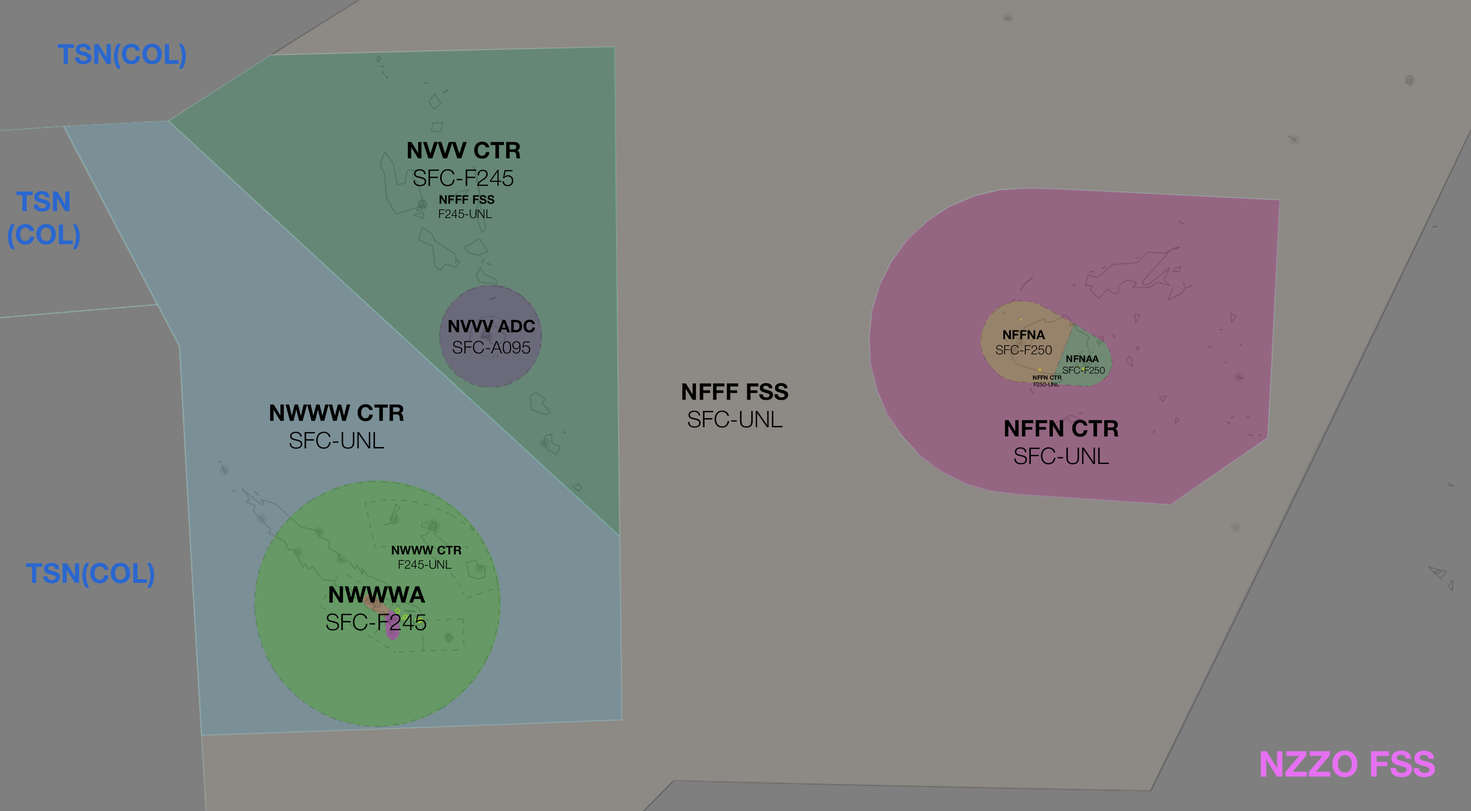
<style>
.page{position:relative;width:1471px;height:811px;background:#8d8984}
.page>*{position:absolute;margin:0}
.t1{font:27.6px "HelveticaNeue-Bold";color:#2967cf}
.t2{font:23px "HelveticaNeue-Bold";color:#000000}
.t3{font:23px "HelveticaNeue-Light";color:#000000}
.t4{font:12px "HelveticaNeue-Bold";color:#000000}
.t5{font:12px "HelveticaNeue-Light";color:#000000}
.t6{font:17.3px "HelveticaNeue-Bold";color:#000000}
.t7{font:17.3px "HelveticaNeue-Light";color:#000000}
.t8{font:12.7px "HelveticaNeue-Light";color:#000000}
.t9{font:12.7px "HelveticaNeue-Bold";color:#000000}
.t10{font:9.6px "HelveticaNeue-Light";color:#000000}
.t11{font:9.6px "HelveticaNeue-Bold";color:#000000}
.t12{font:5.8px "HelveticaNeue-Bold";color:#000000}
.t13{font:5.8px "HelveticaNeue-Light";color:#000000}
.t14{font:35.6px "HelveticaNeue-Bold";color:#e570f1}
</style>
<div class="page">
<p class="t1" style="left:57px;top:44px;width:129px;height:25px">TSN(COL)</p>
<p class="t2" style="left:407px;top:141px;width:113px;height:45px;text-align:center">NVVV CTR<br><span class="t3">SFC-F245</span></p>
<p class="t1" style="left:8px;top:191px;width:72px;height:58px;text-align:center">TSN<br>(COL)</p>
<p class="t4" style="left:439px;top:195px;width:56px;height:23px;text-align:center">NFFF FSS<br><span class="t5">F245-UNL</span></p>
<p class="t6" style="left:448px;top:319px;width:87px;height:35px;text-align:center">NVVV ADC<br><span class="t7">SFC-A095</span></p>
<p class="t8" style="left:996px;top:330px;width:56px;height:25px;text-align:center"><span class="t9">NFFNA<br></span>SFC-F250</p>
<p class="t10" style="left:1062px;top:355px;width:42px;height:19px;text-align:center"><span class="t11">NFNAA <br></span>SFC-F250</p>
<p class="t12" style="left:1032px;top:375px;width:29px;height:12px;text-align:center">NFFN CTR<br><span class="t13">F250-UNL</span></p>
<p class="t2" style="left:682px;top:383px;width:106px;height:45px;text-align:center">NFFF FSS<br><span class="t3">SFC-UNL</span></p>
<p class="t2" style="left:270px;top:404px;width:134px;height:45px;text-align:center">NWWW CTR<br><span class="t3">SFC-UNL</span></p>
<p class="t2" style="left:1004px;top:419px;width:114px;height:45px;text-align:center">NFFN CTR<br><span class="t3">SFC-UNL</span></p>
<p class="t4" style="left:391px;top:546px;width:70px;height:23px;text-align:center">NWWW CTR<br><span class="t5">F245-UNL</span></p>
<p class="t1" style="left:26px;top:563px;width:128px;height:25px">TSN(COL)</p>
<p class="t3" style="left:326px;top:586px;width:100px;height:44px;text-align:center"><span class="t2">NWWWA<br></span>SFC-F245</p>
<p class="t14" style="left:1261px;top:750px;width:174px;height:27px">NZZO FSS</p>
</div>
